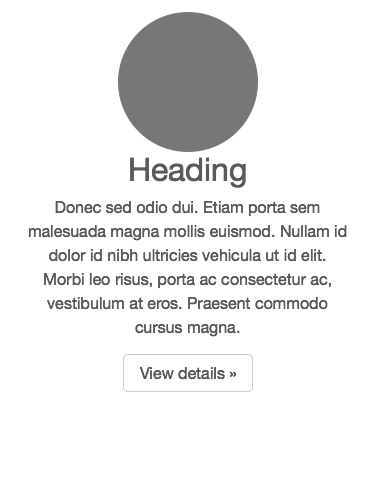
<style>
.page{position:relative;width:375px;height:482px;background:#ffffff}
.page>*{position:absolute;margin:0}
.t1{font:12px "MyriadPro-Regular";color:#5a5a5a}
.t2{font:32px/35.2px "HelveticaNeue";color:#5a5a5a}
.t3{font:12px "MyriadPro-Regular";color:#55595c}
</style>
<div class="page">
<p class="t1" style="left:28px;top:157px;width:319px;height:180px;text-align:center"><span class="t2">Heading<br></span>Donec sed odio dui. Etiam porta sem malesuada magna mollis euismod. Nullam id dolor id nibh ultricies vehicula ut id elit. Morbi leo risus, porta ac consectetur ac, vestibulum at eros. Praesent commodo cursus magna.</p>
<p class="t3" style="left:139px;top:367px;width:98px;height:13px">View details »</p>
</div>
